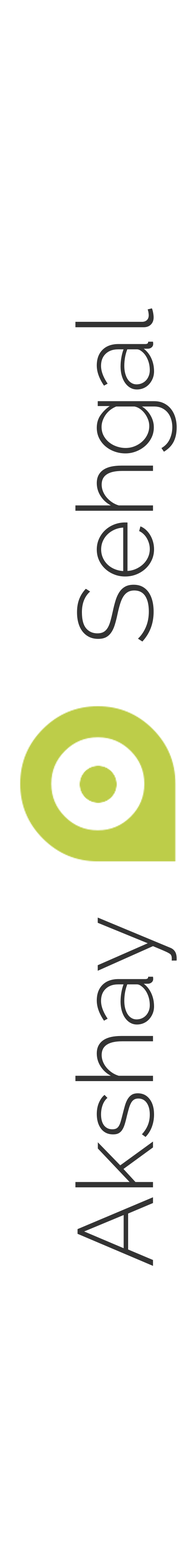
<style>
.page{position:relative;width:196px;height:1568px;background:#ffffff}
.page>*{position:absolute;margin:0}
.t1{font:106.2px "Raleway-Light";color:#333333}
</style>
<div class="page">
<p class="t1" style="left:75px;top:308px;width:102px;height:958px;rotate:-90deg">Akshay          Sehgal</p>
</div>
